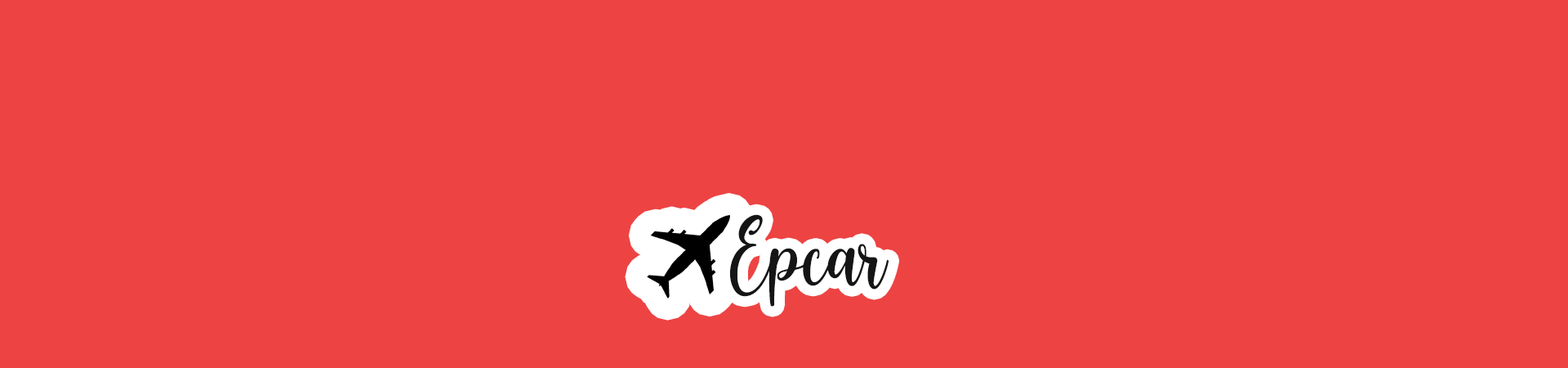
<style>
.page{position:relative;width:1568px;height:368px;background:#ed4343}
.page>*{position:absolute;margin:0}
.t1{font:94.1px "betterPersonalUse";color:#151515}
</style>
<div class="page">
<p class="t1" style="left:729px;top:214px;width:160px;height:92px">Epcar</p>
</div>
